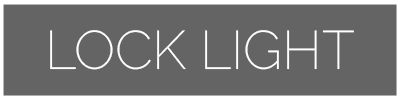
<style>
.page{position:relative;width:400px;height:100px;background:#646464}
.page>*{position:absolute;margin:0}
.t1{font:54.2px "Raleway-ExtraLight";color:#ffffff}
</style>
<div class="page">
<p class="t1" style="left:50px;top:30px;width:304px;height:40px">LOCK LIGHT</p>
</div>
